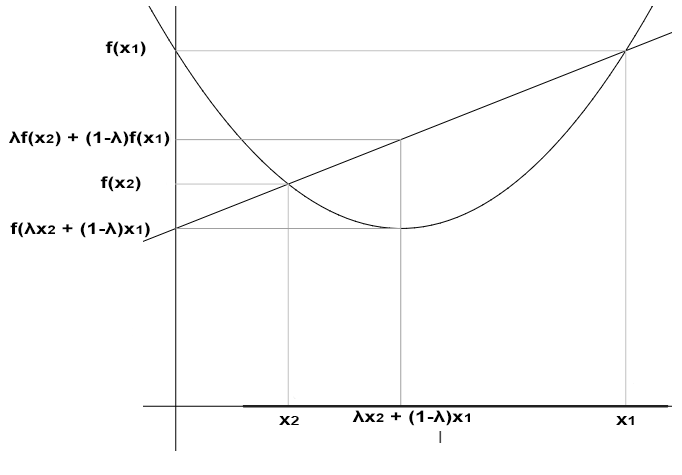
<style>
.page{position:relative;width:682px;height:475px;background:#ffffff}
.page>*{position:absolute;margin:0}
.t1{font:16px "Arial-BoldMT";color:#000000;scale:1.3 1}
.t2{font:12px "Arial-BoldMT";color:#000000;scale:1.3 1}
</style>
<div class="page">
<p class="t1" style="left:105px;top:41px;width:41px;height:16px">f(x<span class="t2">1</span>)</p>
<p class="t1" style="left:9px;top:131px;width:161px;height:16px">λf(x<span class="t2">2</span>) + (1-λ)f(x<span class="t2">1</span>)</p>
<p class="t1" style="left:100px;top:176px;width:41px;height:16px">f(x<span class="t2">2</span>)</p>
<p class="t1" style="left:10px;top:222px;width:140px;height:16px">f(λx<span class="t2">2</span> + (1-λ)x<span class="t2">1</span>)</p>
<p class="t1" style="left:352px;top:410px;width:118px;height:16px">λx<span class="t2">2</span> + (1-λ)x<span class="t2">1</span></p>
<p class="t1" style="left:279px;top:416px;width:20px;height:9px">x<span class="t2">2</span></p>
<p class="t1" style="left:616px;top:416px;width:18px;height:9px">x<span class="t2">1</span></p>
</div>
